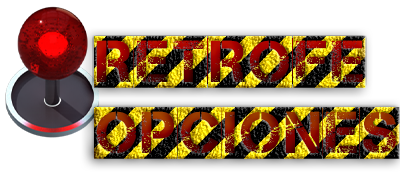
<style>
.page{position:relative;width:400px;height:175px;background:#ffffff}
.page>*{position:absolute;margin:0}
.t1{font:58.7px "Captureit2";letter-spacing:0.01em}
</style>
<div class="page">
<p class="t1" style="left:94px;top:36px;width:306px;height:123px">RetroFE<br>Opciones</p>
</div>
